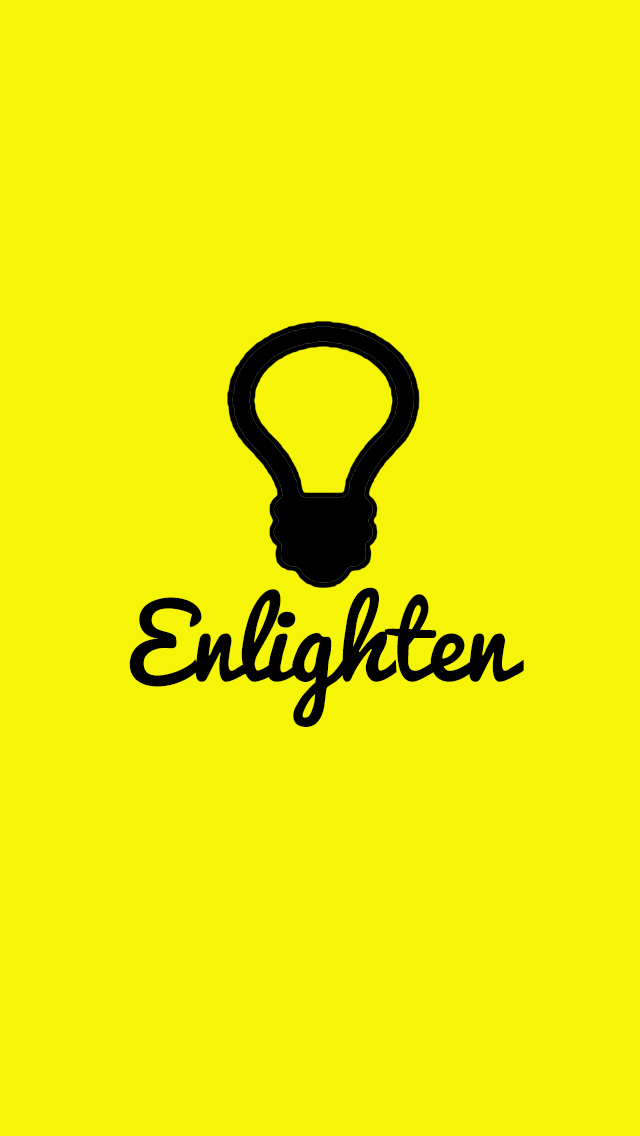
<style>
.page{position:relative;width:640px;height:1136px;background:#f7f507}
.page>*{position:absolute;margin:0}
.t1{font:100px "Pacifico";color:#000000}
</style>
<div class="page">
<p class="t1" style="left:129px;top:587px;width:395px;height:140px">Enlighten</p>
</div>
